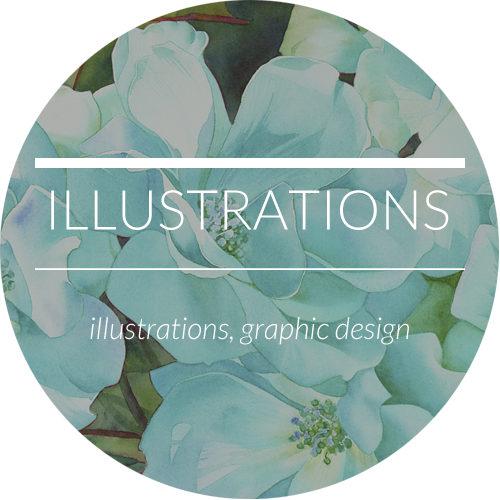
<style>
.page{position:relative;width:500px;height:500px;background:#ffffff}
.page>*{position:absolute;margin:0}
.t1{font:54.9px "Lato-Light";color:#ffffff}
.t2{font:30px "Lato-LightItalic";color:#ffffff}
</style>
<div class="page">
<p class="t1" style="left:51px;top:190px;width:398px;height:40px">ILLUSTRATIONS</p>
<p class="t2" style="left:90px;top:317px;width:319px;height:28px">illustrations, graphic design</p>
</div>
